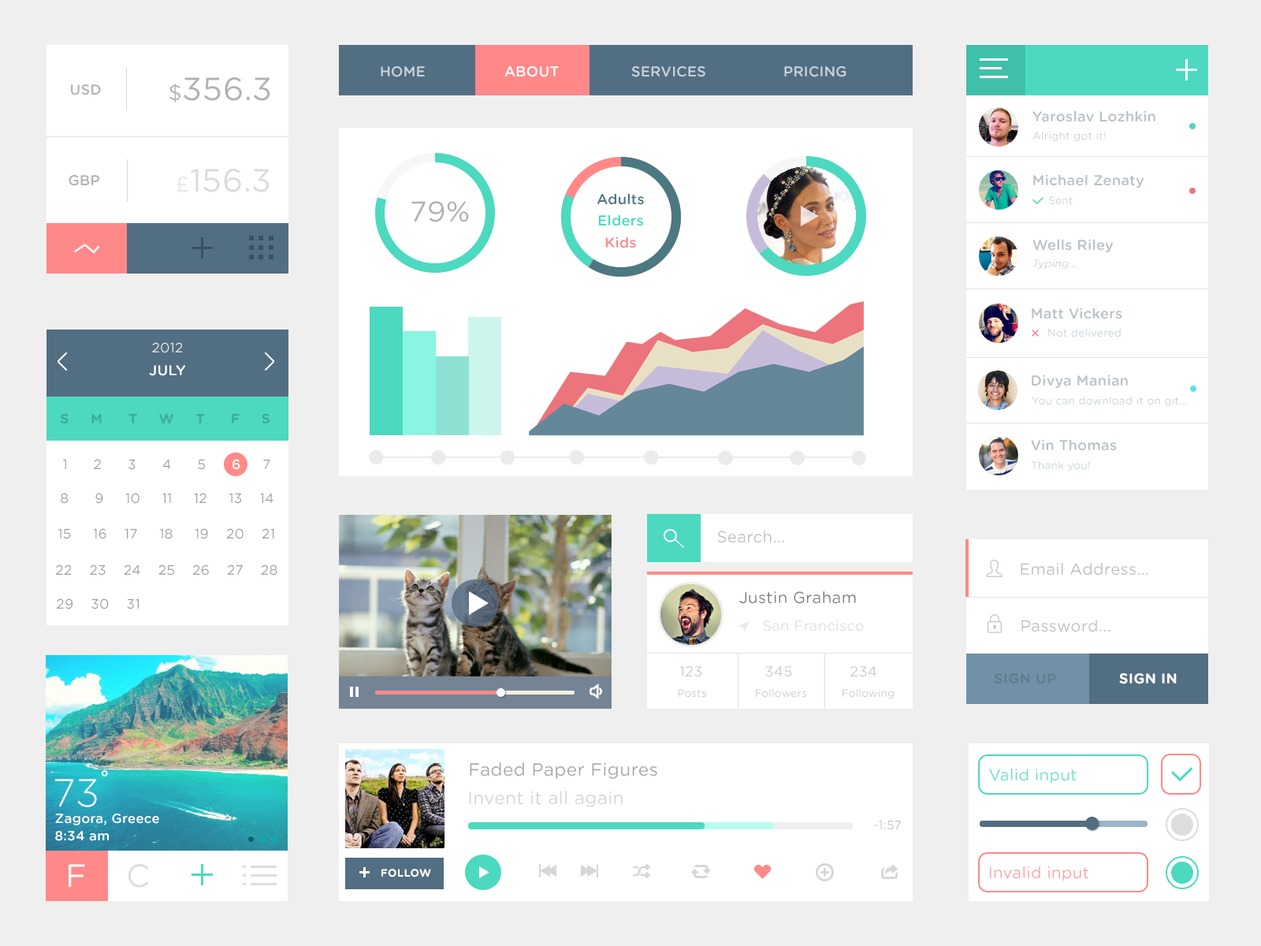
<style>
.page{position:relative;width:1261px;height:946px;background:#ffffff}
.page>*{position:absolute;margin:0}
.t1{font:32.1px "GothamRounded-Book";letter-spacing:0.018em;color:#b2b2b2}
.t2{font:21.4px "GothamRounded-Book";letter-spacing:0.018em;color:#b2b2b2}
.t3{font:14.3px "GothamRounded-Medium";letter-spacing:0.018em;color:#c8d2d9}
.t4{font:14.3px "GothamRounded-Medium";letter-spacing:0.018em;color:#ffffff}
.t5{font:14.3px "GothamRounded-Medium";letter-spacing:0.018em;color:#b2b2b2}
.t6{font:14.3px "GothamRounded-Medium";letter-spacing:0.018em;color:#bac2c7}
.t7{font:10.7px "GothamRounded-Book";letter-spacing:0.018em;color:#c8d2d9}
.t8{font:32.1px "GothamRounded-Book";letter-spacing:0.018em;color:#dcdbdb}
.t9{font:21.4px "GothamRounded-Book";letter-spacing:0.018em;color:#e6e6e6}
.t10{font:14.3px/21.4px "GothamRounded-Medium";letter-spacing:0.018em;color:#4c7981}
.t11{font:14.3px/21.4px "GothamRounded-Medium";letter-spacing:0.018em;color:#4cd9c0}
.t12{font:14.3px/21.4px "GothamRounded-Medium";letter-spacing:0.018em;color:#ff8989}
.t13{font:28.5px "GothamRounded-Book";letter-spacing:0.018em;color:#b0b0b0}
.t14{font:10.7px "GothamRounded-BookItalic";letter-spacing:0.018em;color:#c8d2d9}
.t15{font:13.6px "GothamRounded-Book";letter-spacing:0.018em;color:#e6e6e6}
.t16{font:13.6px "GothamRounded-Bold";letter-spacing:0.018em;color:#3dad99}
.t17{font:13.6px "GothamRounded-Book";letter-spacing:0.018em;color:#9d9d9d}
.t18{font:13.6px "GothamRounded-Medium";letter-spacing:0.018em;color:#ffffff}
.t19{font:16.1px "GothamRounded-Book";letter-spacing:0.018em;color:#bebebe}
.t20{font:16.1px "GothamRounded-Book";letter-spacing:0.018em;color:#7a7a7a}
.t21{font:14.3px "GothamRounded-Book";letter-spacing:0.018em;color:#dfdfdf}
.t22{font:14.3px "GothamRounded-Book";letter-spacing:0.018em;color:#cccccc}
.t23{font:14.3px "GothamRounded-Bold";letter-spacing:0.018em;color:#627d90}
.t24{font:14.3px "GothamRounded-Bold";letter-spacing:0.018em;color:#ffffff}
.t25{font:10.7px "GothamRounded-Book";letter-spacing:0.018em;color:#cccccc}
.t26{font:17.8px "GothamRounded-Book";letter-spacing:0.018em;color:#a8a8a8}
.t27{font:16.1px "GothamRounded-Book";letter-spacing:0.018em;color:#64dec9}
.t28{font:17.8px "GothamRounded-Book";letter-spacing:0.018em;color:#d6d6d6}
.t29{font:13.2px/17.8px "GothamRounded-Medium";letter-spacing:0.018em;color:#ffffff}
.t30{font:12.5px "GothamRounded-Book";letter-spacing:0.018em;color:#c6c6c6}
.t31{font:32.1px "GothamRounded-Book";letter-spacing:0.018em;color:#ffffff}
.t32{font:32.1px "GothamRounded-Book";letter-spacing:0.018em;color:#dedede}
.t33{font:10.7px "GothamRounded-Bold";letter-spacing:0.018em;color:#ffffff}
.t34{font:16.1px "GothamRounded-Book";letter-spacing:0.018em;color:#ffa0a0}
</style>
<div class="page">
<p class="t1" style="left:169px;top:77px;width:101px;height:25px"><span class="t2">$</span>356.3</p>
<p class="t3" style="left:381px;top:66px;width:44px;height:11px">HOME</p>
<p class="t4" style="left:504px;top:66px;width:55px;height:11px">ABOUT</p>
<p class="t3" style="left:631px;top:66px;width:74px;height:11px">SERVICES</p>
<p class="t3" style="left:784px;top:66px;width:62px;height:11px">PRICING</p>
<p class="t5" style="left:71px;top:84px;width:30px;height:11px">USD</p>
<p class="t6" style="left:1032px;top:110px;width:123px;height:12px">Yaroslav Lozhkin</p>
<p class="t7" style="left:1032px;top:132px;width:74px;height:10px">Alright got it!</p>
<p class="t8" style="left:177px;top:169px;width:93px;height:23px"><span class="t9">£</span>156.3</p>
<p class="t5" style="left:69px;top:175px;width:30px;height:11px">GBP</p>
<p class="t6" style="left:1033px;top:174px;width:110px;height:14px">Michael Zenaty</p>
<p class="t10" style="left:597px;top:193px;width:47px;height:55px;text-align:center">Adults<br><span class="t11">Elders<br></span><span class="t12">Kids</span></p>
<p class="t7" style="left:1049px;top:196px;width:24px;height:9px">Sent</p>
<p class="t13" style="left:411px;top:201px;width:58px;height:21px">79%</p>
<p class="t6" style="left:1032px;top:239px;width:81px;height:13px">Wells Riley</p>
<p class="t14" style="left:1033px;top:259px;width:44px;height:11px">Typing...</p>
<p class="t6" style="left:1032px;top:307px;width:90px;height:12px">Matt Vickers</p>
<p class="t7" style="left:1048px;top:329px;width:73px;height:8px">Not delivered</p>
<p class="t15" style="left:152px;top:342px;width:31px;height:11px">2012</p>
<p class="t4" style="left:149px;top:365px;width:36px;height:11px">JULY</p>
<p class="t6" style="left:1032px;top:374px;width:96px;height:14px">Divya Manian</p>
<p class="t7" style="left:1032px;top:396px;width:155px;height:11px">You can download it on git...</p>
<p class="t16" style="left:61px;top:413px;width:209px;height:11px">S     M      T     W     T      F     S</p>
<p class="t6" style="left:1031px;top:439px;width:86px;height:12px">Vin Thomas</p>
<p class="t17" style="left:63px;top:459px;width:207px;height:11px">1      2      3      4      5      <span class="t18">6     </span>7</p>
<p class="t7" style="left:1031px;top:461px;width:59px;height:10px">Thank you!</p>
<p class="t17" style="left:61px;top:493px;width:212px;height:11px">8      9     10     11     12     13    14</p>
<p class="t17" style="left:58px;top:528px;width:216px;height:11px">15     16    17     18     19    20    21</p>
<p class="t19" style="left:717px;top:530px;width:67px;height:13px">Search...</p>
<p class="t17" style="left:56px;top:564px;width:221px;height:11px">22    23    24    25    26    27    28</p>
<p class="t19" style="left:1021px;top:563px;width:127px;height:12px">Email Address...</p>
<p class="t20" style="left:739px;top:591px;width:117px;height:13px">Justin Graham</p>
<p class="t17" style="left:57px;top:598px;width:82px;height:11px">29    30    31</p>
<p class="t21" style="left:763px;top:620px;width:101px;height:11px">San Francisco</p>
<p class="t19" style="left:1021px;top:619px;width:89px;height:13px">Password...</p>
<p class="t22" style="left:679px;top:666px;width:197px;height:11px">123   345   234</p>
<p class="t23" style="left:994px;top:673px;width:62px;height:11px">SIGN UP</p>
<p class="t24" style="left:1119px;top:673px;width:58px;height:11px">SIGN IN</p>
<p class="t25" style="left:678px;top:689px;width:216px;height:10px">Posts       Followers          Following</p>
<p class="t26" style="left:470px;top:762px;width:187px;height:17px">Faded Paper Figures</p>
<p class="t27" style="left:989px;top:768px;width:88px;height:15px">Valid input</p>
<p class="t28" style="left:469px;top:790px;width:154px;height:17px">Invent it all again</p>
<p class="t29" style="left:55px;top:813px;width:104px;height:28px">Zagora, Greece<br>8:34 am</p>
<p class="t30" style="left:874px;top:820px;width:28px;height:10px">-1:57</p>
<p class="t31" style="left:69px;top:864px;width:16px;height:23px">F</p>
<p class="t32" style="left:128px;top:864px;width:20px;height:23px">C</p>
<p class="t33" style="left:381px;top:868px;width:50px;height:9px">FOLLOW</p>
<p class="t34" style="left:990px;top:866px;width:98px;height:15px">Invalid input</p>
</div>
